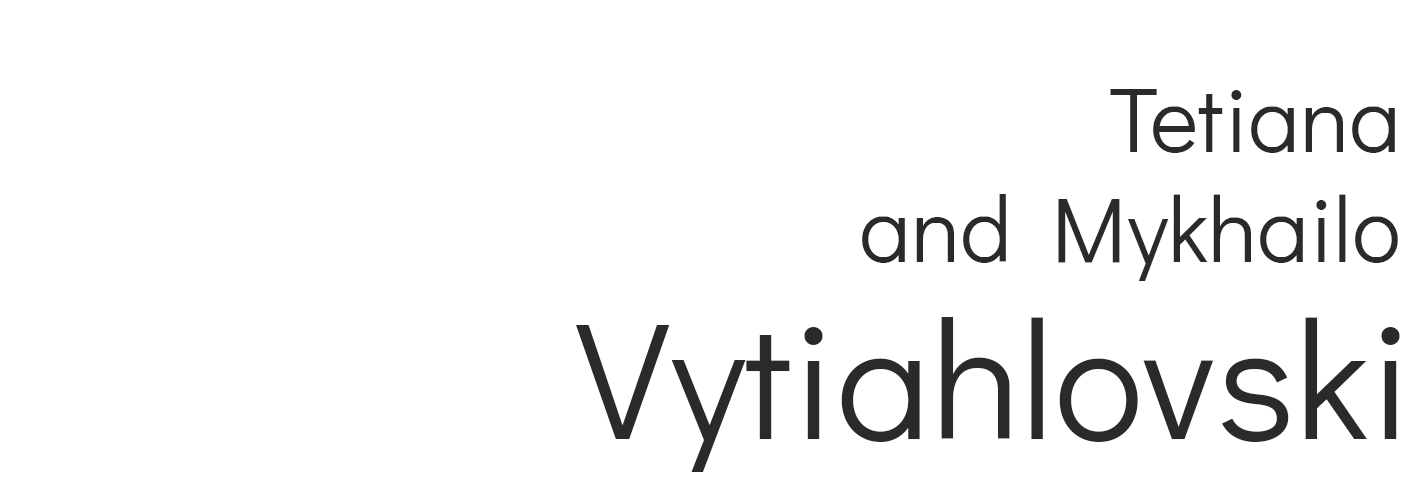
<style>
.page{position:relative;width:1424px;height:485px;background:#ffffff}
.page>*{position:absolute;margin:0}
.t1{font:92px "DidactGothic-Regular";color:#2a2a2a}
.t2{font:168px "DidactGothic-Regular";color:#2a2a2a}
</style>
<div class="page">
<p class="t1" style="left:862px;top:89px;width:536px;height:192px;text-align:right">Tetiana<br>and Mykhailo</p>
<p class="t2" style="left:576px;top:317px;width:824px;height:155px">Vytiahlovski</p>
</div>
